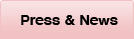
<style>
.page{position:relative;width:134px;height:39px}
.page>*{position:absolute;margin:0}
.t1{font:14px "Helvetica-Bold";color:#000000;scale:1.06 1}
</style>
<div class="page">
<p class="t1" style="left:21px;top:15px;width:97px;height:10px">Press &amp; News</p>
</div>
